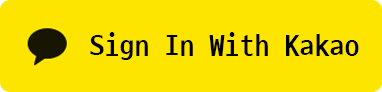
<style>
.page{position:relative;width:382px;height:92px;background:#fee500}
.page>*{position:absolute;margin:0}
.t1{font:30px "D2CodingBold";color:#000000}
</style>
<div class="page">
<p class="t1" style="left:90px;top:32px;width:269px;height:28px">Sign In With Kakao</p>
</div>
